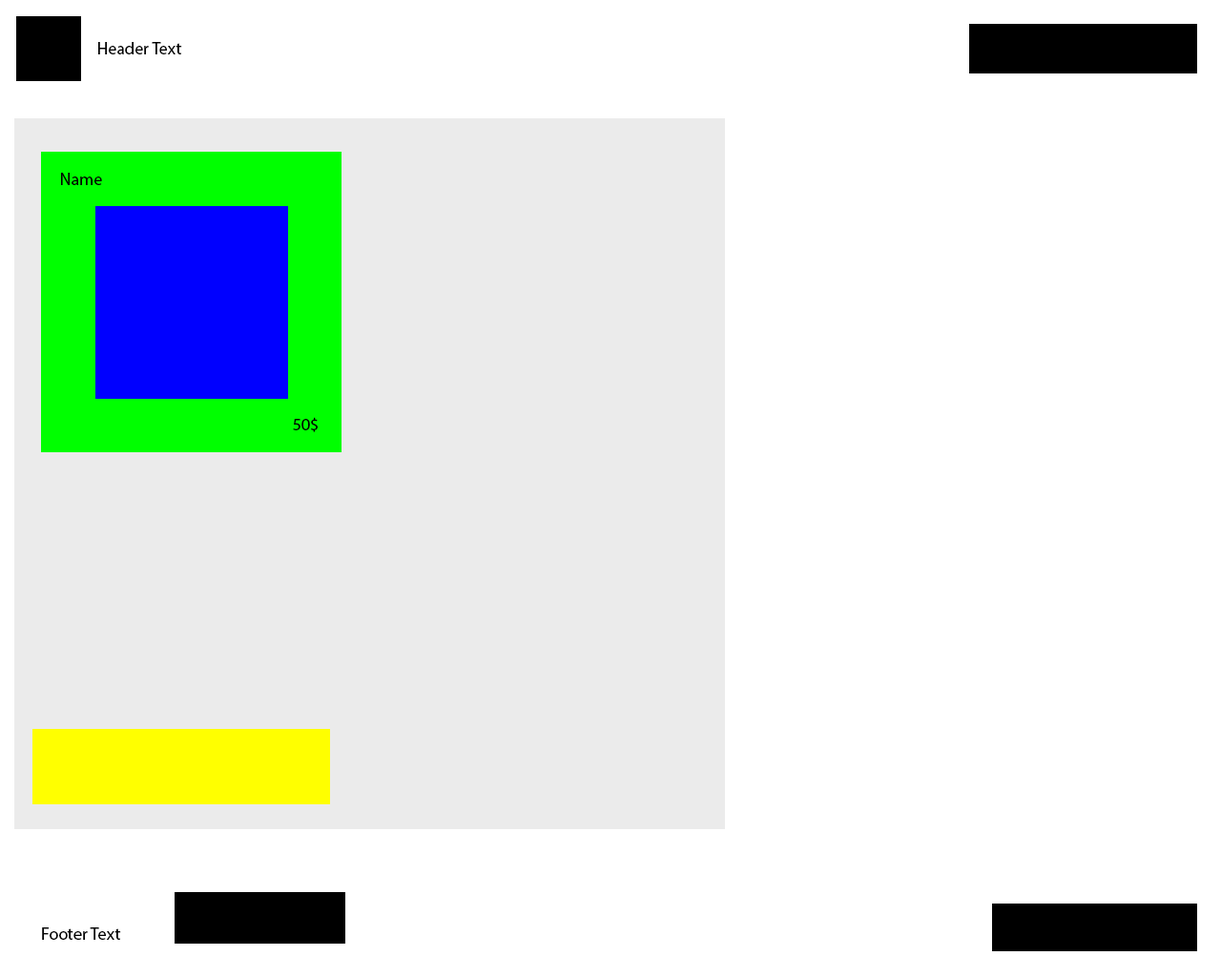
<style>
.page{position:relative;width:1221px;height:977px;background:#ffffff}
.page>*{position:absolute;margin:0}
.t1{font:17.2px "MyriadPro-Regular";color:#000000}
</style>
<div class="page">
<p class="t1" style="left:98px;top:42px;width:84px;height:12px">Header Text</p>
<p class="t1" style="left:61px;top:173px;width:41px;height:12px">Name</p>
<p class="t1" style="left:293px;top:417px;width:25px;height:15px">50$</p>
<p class="t1" style="left:42px;top:927px;width:79px;height:13px">Footer Text</p>
</div>
